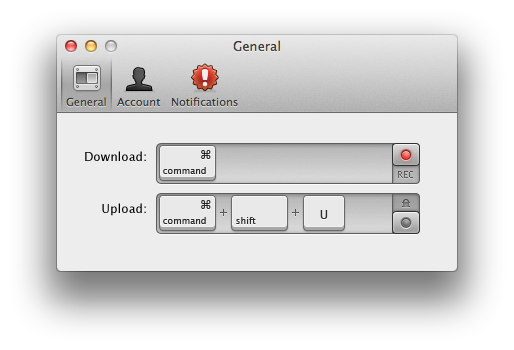
<style>
.page{position:relative;width:514px;height:350px;background:#ededed}
.page>*{position:absolute;margin:0}
.t1{font:12px "LucidaGrande";letter-spacing:0.01em;color:#2a2a2a}
.t2{font:12px "LucidaGrande";letter-spacing:0.01em;color:#000000}
.t3{font:9px "LucidaGrande";letter-spacing:0.01em;color:#2a2a2a}
.t4{font:9px "LucidaGrande";letter-spacing:0.01em;color:#5c5c5c}
</style>
<div class="page">
<p class="t1" style="left:201px;top:150px;width:10px;height:9px">⌘</p>
<p class="t2" style="left:85px;top:151px;width:61px;height:10px">Download:</p>
<p class="t3" style="left:163px;top:167px;width:43px;height:7px">command</p>
<p class="t4" style="left:398px;top:171px;width:15px;height:7px">REC</p>
<p class="t2" style="left:102px;top:203px;width:44px;height:13px">Upload:</p>
<p class="t1" style="left:201px;top:200px;width:10px;height:9px">⌘</p>
<p class="t3" style="left:163px;top:217px;width:43px;height:7px">command</p>
<p class="t3" style="left:236px;top:217px;width:20px;height:7px">shift</p>
<p class="t1" style="left:320px;top:210px;width:8px;height:9px">U</p>
</div>
